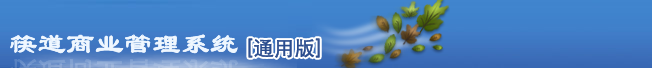
<style>
.page{position:relative;width:652px;height:68px}
.page>*{position:absolute;margin:0}
.t1{font:28px "LiSu";color:#eff7ff;font-weight:bold}
.t2{font:20px "STXihei";color:#2a4c8e;font-weight:bold}
</style>
<div class="page">
<p class="t1" style="left:10px;top:34px;width:228px;height:20px">筷道商业管理系统</p>
<p class="t2" style="left:248px;top:38px;width:72px;height:20px">[通用版]</p>
</div>
